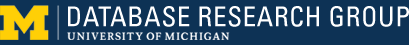
<style>
.page{position:relative;width:409px;height:45px;background:#0d3255}
.page>*{position:absolute;margin:0}
.t1{font:27.3px "Univers-Condensed";letter-spacing:0.02em;color:#ffffff}
</style>
<div class="page">
<p class="t1" style="left:68px;top:6px;width:341px;height:21px">DATABASE RESEARCH GROUP</p>
</div>
